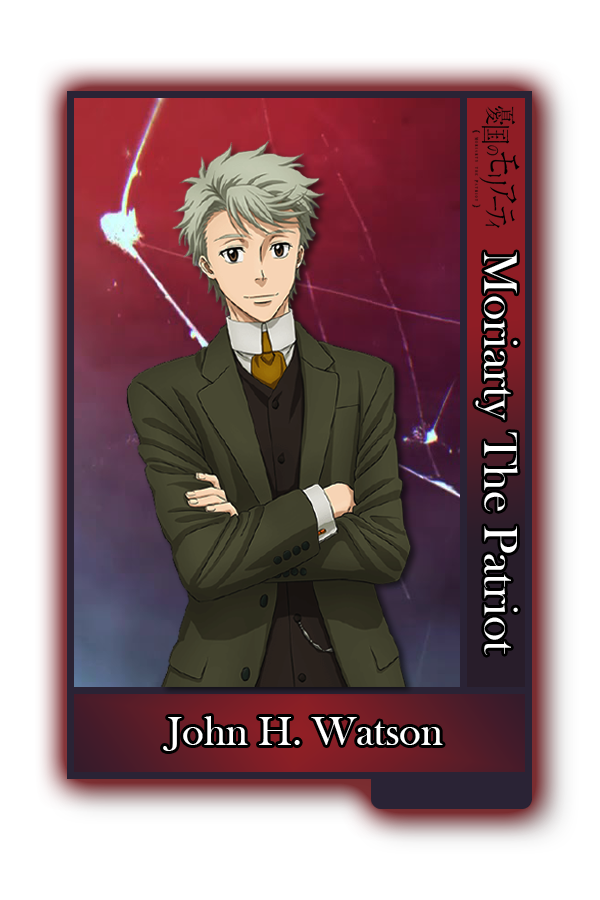
<style>
.page{position:relative;width:600px;height:900px;background:#ffffff}
.page>*{position:absolute;margin:0}
.t1{font:48.8px "BaskOldFace";color:#ffffff}
.t2{font:41.7px "BaskOldFace";color:#ffffff}
</style>
<div class="page">
<p class="t1" style="left:475px;top:252px;width:43px;height:403px;rotate:90deg">Moriarty The Patriot</p>
<p class="t2" style="left:163px;top:716px;width:280px;height:35px">John H. Watson</p>
</div>
